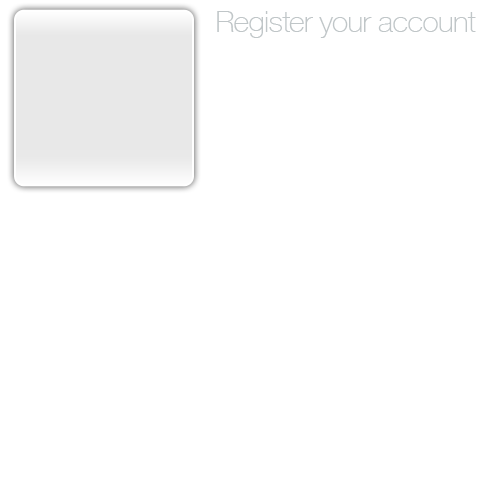
<style>
.page{position:relative;width:500px;height:500px;background:#ffffff}
.page>*{position:absolute;margin:0}
.t1{font:30px "HelveticaNeue-Thin";letter-spacing:-0.02em;color:#c0c6c8}
</style>
<div class="page">
<p class="t1" style="left:217px;top:11px;width:259px;height:27px">Register your account</p>
</div>
